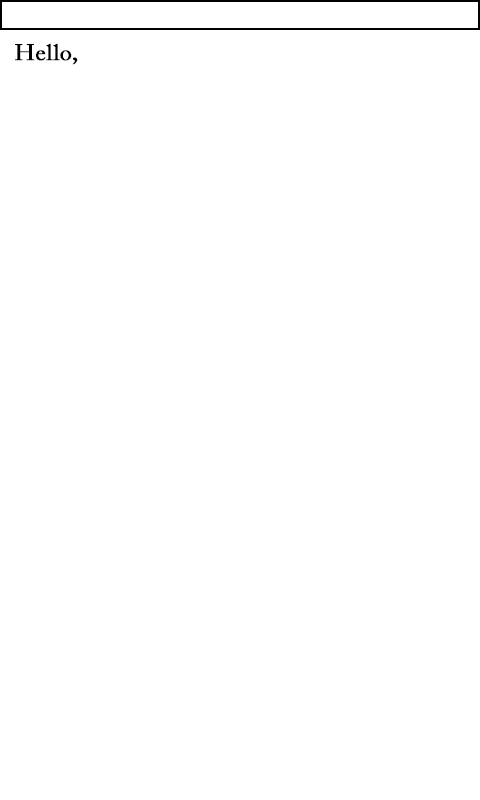
<style>
.page{position:relative;width:480px;height:800px;background:#ffffff}
.page>*{position:absolute;margin:0}
.t1{font:22.5px "ACaslonPro-Regular";color:#000000;font-weight:bold;scale:1.07 1}
</style>
<div class="page">
<p class="t1" style="left:15px;top:43px;width:63px;height:22px">Hello,</p>
</div>
